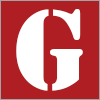
<style>
.page{position:relative;width:100px;height:100px;background:#af1e23}
.page>*{position:absolute;margin:0}
.t1{font:116.7px "Stencil";color:#ffffff}
</style>
<div class="page">
<p class="t1" style="left:16px;top:9px;width:67px;height:82px">G</p>
</div>
